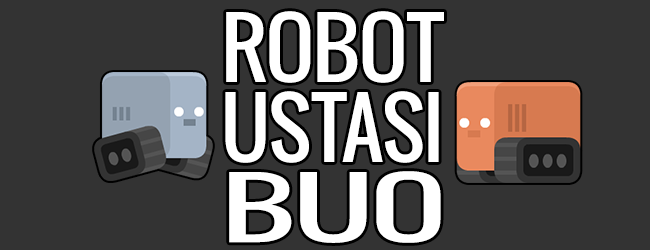
<style>
.page{position:relative;width:650px;height:250px;background:#333333}
.page>*{position:absolute;margin:0}
.t1{font:80px/80px "Oswald-Regular";color:#ffffff}
.t2{font:80px/80px "Oswald-Regular";color:#ffffff;scale:1.06 1}
.t3{font:80px/80px "Oswald-Regular";color:#ffffff;scale:1.65 1}
</style>
<div class="page">
<p class="t1" style="left:225px;top:11px;width:219px;height:232px"><span class="t2">ROBOT<br></span>USTASI<br><span class="t3">BUO</span></p>
</div>
